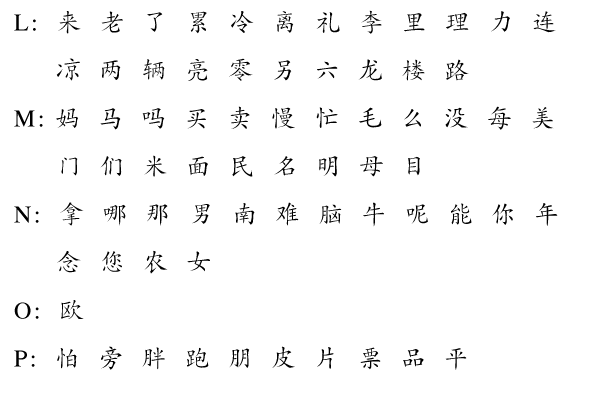
<style>
.page{position:relative;width:595px;height:417px;background:#ffffff}
.page>*{position:absolute;margin:0}
.t1{font:24px/48px "CTKaiTiSJ";letter-spacing:0.1em;color:#000000}
.t2{font:24px/48px "CTKaiTiSJ";letter-spacing:0.1em;color:#ffffff}
.t3{font:24px "CTKaiTiSJ";letter-spacing:0.1em;color:#000000}
.t4{font:24px "CTKaiTiSJ";letter-spacing:0.1em;color:#000000;scale:0.8 1}
</style>
<div class="page">
<p class="t1" style="left:14px;top:10px;width:544px;height:360px">L:  来  老  了  累  冷  离  礼  李  里  理  力  连  <span class="t2">L:  </span>     两  辆  亮  零  另  六  龙  楼  路  <br>M: 妈  马  吗  买  卖  慢  忙  毛  么  没  每  美  <span class="t2">L:  </span>门  们  米  面  民  名  明  母  目  <br>N:  拿  哪  那  男  南  难  脑  牛  呢  能  你  年  <br><span class="t2">L:  </span>念  您  农  女  <br>O:  欧 <br>P:  怕  旁  胖  跑  朋  皮  片  票  品  平</p>
<p class="t3" style="left:56px;top:64px;width:7px;height:13px">冫</p>
<p class="t4" style="left:64px;top:58px;width:16px;height:23px">京</p>
</div>
